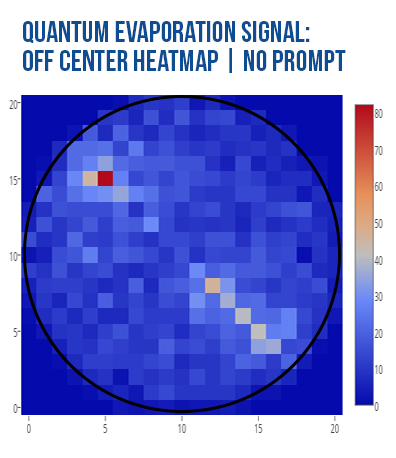
<style>
.page{position:relative;width:396px;height:458px;background:#ffffff}
.page>*{position:absolute;margin:0}
.t1{font:30px/29px "BebasNeue";color:#0f4d92}
</style>
<div class="page">
<p class="t1" style="left:23px;top:21px;width:323px;height:52px">Quantum Evaporation Signal:<br>Off Center Heatmap | No Prompt</p>
</div>
